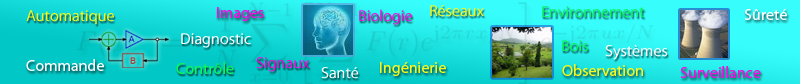
<style>
.page{position:relative;width:800px;height:84px}
.page>*{position:absolute;margin:0}
.t1{font:16px "MyriadPro-Regular";color:#f6f91b}
.t2{font:16px "MyriadPro-Regular";color:#09f65c}
.t3{font:16px "MyriadPro-Regular";color:#f609e2}
.t4{font:16px "MyriadPro-Regular";color:#ffffff}
.t5{font:16px "MyriadPro-Regular";color:#fdfefe}
</style>
<div class="page">
<p class="t1" style="left:430px;top:5px;width:54px;height:12px">Réseaux</p>
<p class="t2" style="left:542px;top:6px;width:103px;height:12px">Environnement</p>
<p class="t1" style="left:26px;top:10px;width:88px;height:15px">Automatique</p>
<p class="t3" style="left:217px;top:7px;width:47px;height:14px">Images</p>
<p class="t3" style="left:359px;top:9px;width:53px;height:16px">Biologie</p>
<p class="t4" style="left:744px;top:9px;width:43px;height:11px">Sûreté</p>
<p class="t4" style="left:181px;top:33px;width:70px;height:15px">Diagnostic</p>
<p class="t2" style="left:562px;top:40px;width:26px;height:12px">Bois</p>
<p class="t4" style="left:605px;top:45px;width:63px;height:15px">Systèmes</p>
<p class="t5" style="left:26px;top:59px;width:78px;height:12px">Commande</p>
<p class="t2" style="left:176px;top:62px;width:58px;height:12px">Contrôle</p>
<p class="t3" style="left:256px;top:57px;width:54px;height:15px">Signaux</p>
<p class="t1" style="left:380px;top:62px;width:66px;height:14px">Ingénierie</p>
<p class="t1" style="left:562px;top:64px;width:81px;height:12px">Observation</p>
<p class="t4" style="left:321px;top:67px;width:38px;height:12px">Santé</p>
<p class="t3" style="left:680px;top:66px;width:81px;height:12px">Surveillance</p>
</div>
